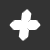
<style>
.page{position:relative;width:50px;height:50px;background:#333333}
.page>*{position:absolute;margin:0}
.t1{font:90px "LCDMonoNormal";color:#ffffff}
</style>
<div class="page">
<p class="t1" style="left:10px;top:10px;width:30px;height:30px">+</p>
</div>
